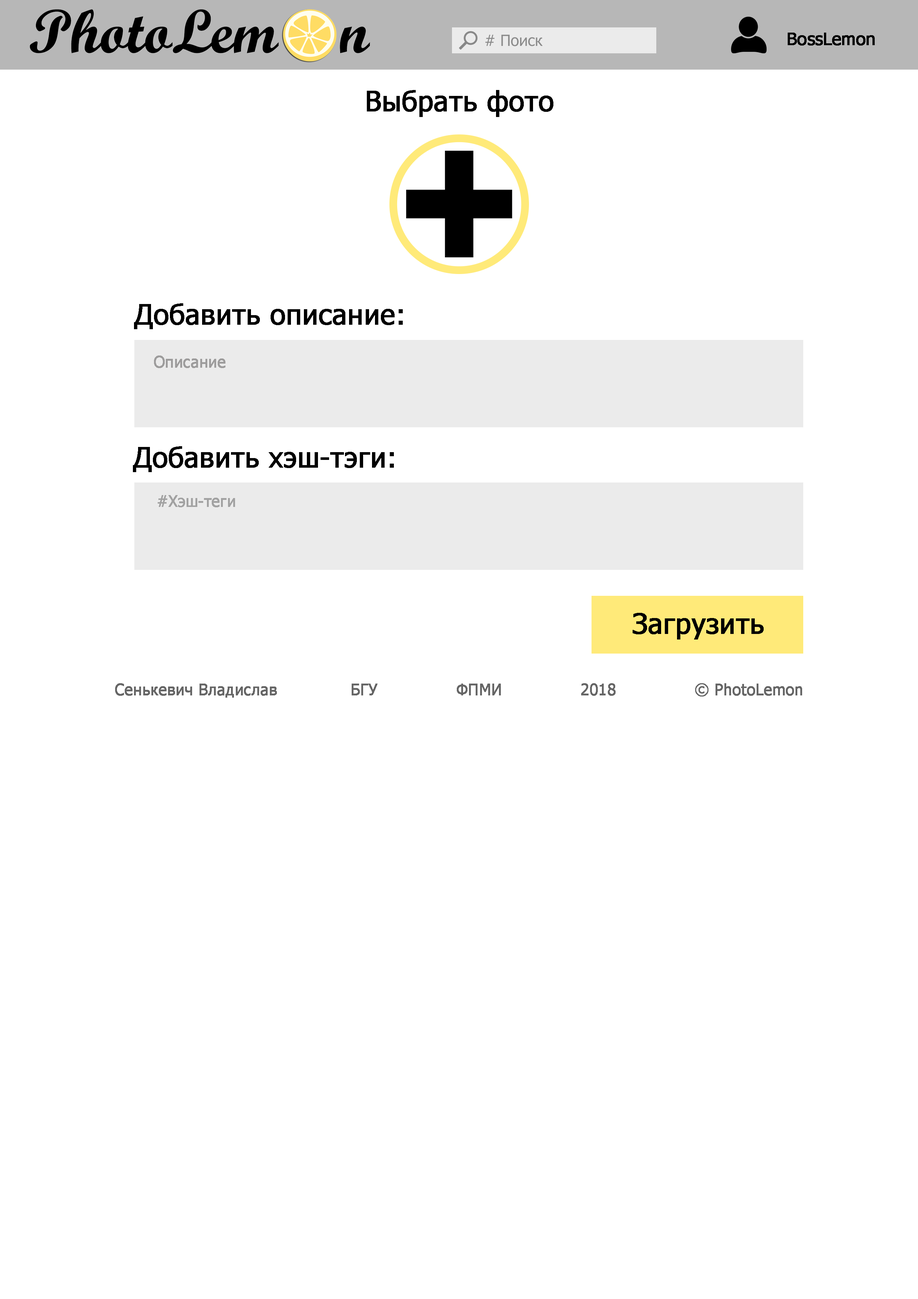
<style>
.page{position:relative;width:918px;height:1299px;background:#ffffff}
.page>*{position:absolute;margin:0}
.t1{font:61.7px "ScriptMTBold";color:#000000}
.t2{font:15.4px "Tahoma";color:#8a8a8a}
.t3{font:17px "Tahoma";color:#000000;font-weight:bold}
.t4{font:27.8px "Tahoma";color:#000000;font-weight:bold}
.t5{font:15.4px "Tahoma";color:#9d9c9c;font-weight:bold}
.t6{font:15.4px "Tahoma";color:#a2a2a2;font-weight:bold}
.t7{font:15.4px "Tahoma";color:#666666;font-weight:bold}
</style>
<div class="page">
<p class="t1" style="left:30px;top:9px;width:340px;height:44px">PhotoLem    n</p>
<p class="t2" style="left:485px;top:34px;width:58px;height:12px"># Поиск</p>
<p class="t3" style="left:788px;top:33px;width:87px;height:13px">BossLemon</p>
<p class="t4" style="left:367px;top:90px;width:186px;height:27px">Выбрать фото</p>
<p class="t4" style="left:134px;top:303px;width:269px;height:26px">Добавить описание:</p>
<p class="t5" style="left:154px;top:355px;width:71px;height:13px">Описание</p>
<p class="t4" style="left:133px;top:446px;width:261px;height:26px">Добавить хэш-тэги:</p>
<p class="t6" style="left:158px;top:495px;width:77px;height:12px">#Хэш-теги</p>
<p class="t4" style="left:633px;top:613px;width:131px;height:26px">Загрузить</p>
<p class="t7" style="left:115px;top:683px;width:687px;height:14px">Cенькевич Владислав              БГУ               ФПМИ               2018               © PhotoLemon</p>
</div>
